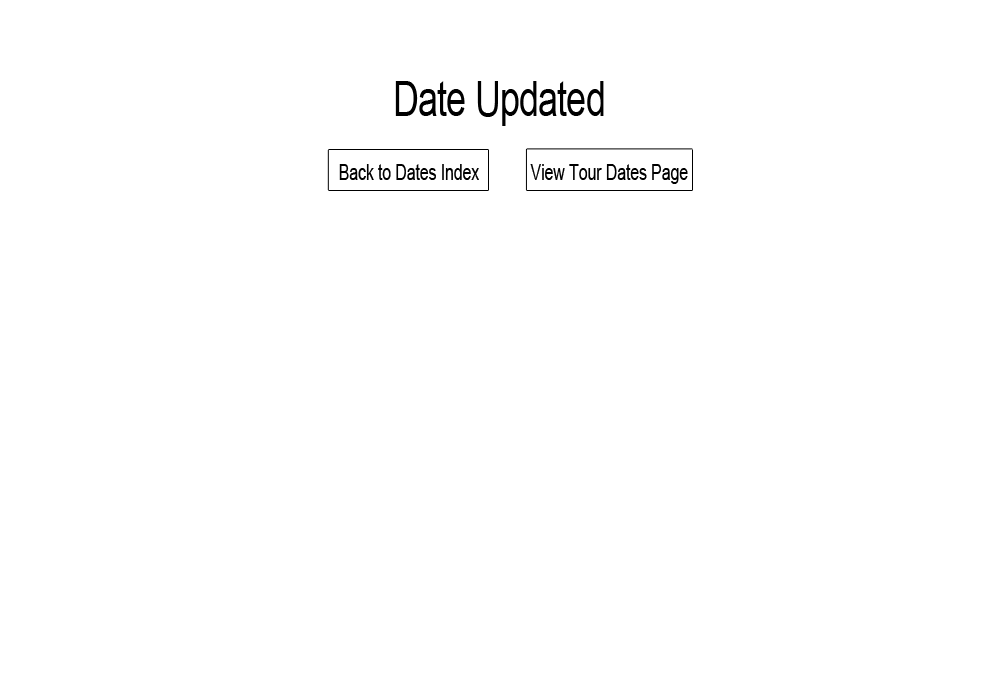
<style>
.page{position:relative;width:1000px;height:700px;background:#ffffff}
.page>*{position:absolute;margin:0}
.t1{font:48.7px "ArialMT";letter-spacing:-0.02em;color:#000000;scale:0.73 1}
.t2{font:22.3px "ArialMT";letter-spacing:-0.02em;color:#000000;scale:0.73 1}
</style>
<div class="page">
<p class="t1" style="left:395px;top:81px;width:209px;height:45px">Date Updated</p>
<p class="t2" style="left:339px;top:164px;width:140px;height:16px">Back to Dates Index</p>
<p class="t2" style="left:530px;top:164px;width:158px;height:20px">View Tour Dates Page</p>
</div>
